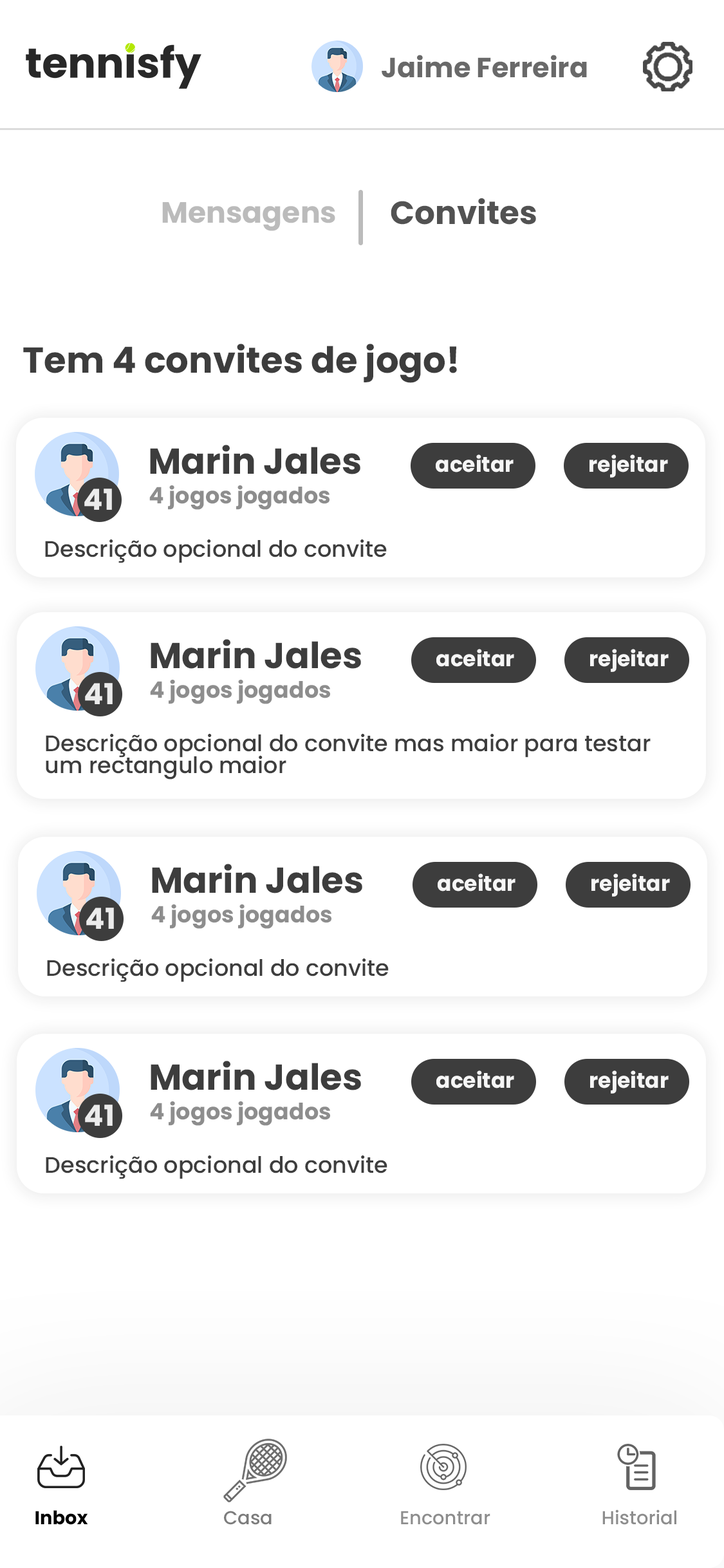
<style>
.page{position:relative;width:724px;height:1568px;background:#ffffff}
.page>*{position:absolute;margin:0}
.t1{font:27.7px "Poppins-Bold";color:#696969}
.t2{font:29.4px "Poppins-Bold";color:#bbbbbb}
.t3{font:32.2px "Poppins-Bold";color:#3d3d3d}
.t4{font:36px "Poppins-Bold";color:#3d3d3d}
.t5{font:21.3px "Poppins-Bold";color:#f6f6f6}
.t6{font:22.5px "Poppins-Bold";color:#8d8d8d}
.t7{font:29px "Poppins-Bold";color:#ebebeb}
.t8{font:22.5px "Poppins-Medium";color:#3d3d3d}
.t9{font:22.5px/21.5px "Poppins-Medium";color:#3d3d3d}
.t10{font:18.7px "Poppins-Bold";color:#000000}
.t11{font:18.7px "Poppins-Medium";color:#7c7c7c}
.t12{font:18.7px "Poppins-Medium";color:#8d8d8d}
</style>
<div class="page">
<p class="t1" style="left:382px;top:55px;width:205px;height:23px">Jaime Ferreira</p>
<p class="t2" style="left:162px;top:202px;width:173px;height:29px">Mensagens</p>
<p class="t3" style="left:391px;top:198px;width:145px;height:27px;opacity:0.93">Convites</p>
<p class="t4" style="left:23px;top:344px;width:434px;height:39px">Tem 4 convites de jogo!</p>
<p class="t4" style="left:150px;top:445px;width:210px;height:29px">Marin Jales</p>
<p class="t5" style="left:436px;top:454px;width:78px;height:18px">aceitar</p>
<p class="t5" style="left:590px;top:454px;width:78px;height:24px">rejeitar</p>
<p class="t6" style="left:149px;top:485px;width:181px;height:25px">4 jogos jogados</p>
<p class="t7" style="left:84px;top:489px;width:28px;height:21px">41</p>
<p class="t8" style="left:45px;top:539px;width:342px;height:24px">Descrição opcional do convite</p>
<p class="t4" style="left:151px;top:639px;width:210px;height:30px">Marin Jales</p>
<p class="t5" style="left:436px;top:649px;width:78px;height:18px">aceitar</p>
<p class="t5" style="left:590px;top:649px;width:79px;height:23px">rejeitar</p>
<p class="t7" style="left:85px;top:683px;width:28px;height:21px">41</p>
<p class="t6" style="left:150px;top:680px;width:180px;height:24px">4 jogos jogados</p>
<p class="t9" style="left:46px;top:734px;width:605px;height:45px">Descrição opcional do convite mas maior para testar<br>um rectangulo maior</p>
<p class="t4" style="left:152px;top:864px;width:210px;height:29px">Marin Jales</p>
<p class="t5" style="left:438px;top:873px;width:78px;height:18px">aceitar</p>
<p class="t5" style="left:592px;top:873px;width:78px;height:24px">rejeitar</p>
<p class="t6" style="left:151px;top:904px;width:180px;height:25px">4 jogos jogados</p>
<p class="t7" style="left:86px;top:908px;width:28px;height:21px">41</p>
<p class="t8" style="left:47px;top:958px;width:342px;height:24px">Descrição opcional do convite</p>
<p class="t4" style="left:151px;top:1061px;width:210px;height:29px">Marin Jales</p>
<p class="t5" style="left:436px;top:1070px;width:78px;height:18px">aceitar</p>
<p class="t5" style="left:590px;top:1070px;width:79px;height:24px">rejeitar</p>
<p class="t7" style="left:85px;top:1105px;width:28px;height:21px">41</p>
<p class="t6" style="left:150px;top:1101px;width:180px;height:25px">4 jogos jogados</p>
<p class="t8" style="left:46px;top:1155px;width:341px;height:24px">Descrição opcional do convite</p>
<p class="t10" style="left:35px;top:1510px;width:53px;height:15px">Inbox</p>
<p class="t11" style="left:224px;top:1511px;width:48px;height:14px">Casa</p>
<p class="t12" style="left:401px;top:1511px;width:89px;height:14px">Encontrar</p>
<p class="t12" style="left:602px;top:1509px;width:75px;height:16px">Historial</p>
</div>
